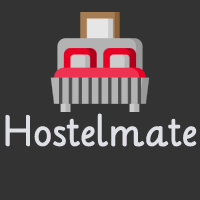
<style>
.page{position:relative;width:200px;height:200px;background:#333333}
.page>*{position:absolute;margin:0}
.t1{font:34.3px "Lilly";color:#dfdfe6}
</style>
<div class="page">
<p class="t1" style="left:5px;top:113px;width:192px;height:34px">Hostelmate</p>
</div>
